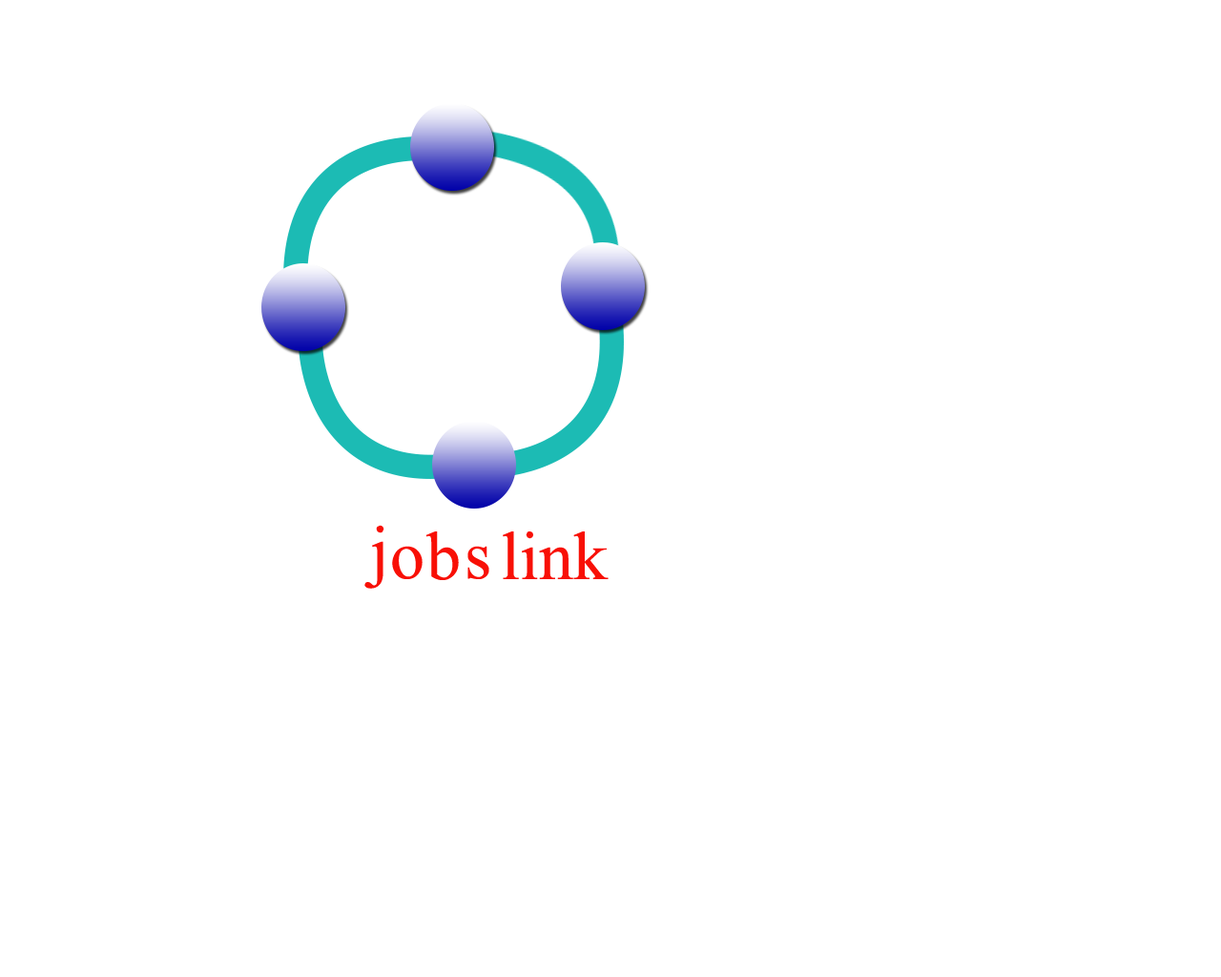
<style>
.page{position:relative;width:1221px;height:977px;background:#ffffff}
.page>*{position:absolute;margin:0}
.t1{font:68.7px "TimesNewRomanPSMT";color:#f81006}
</style>
<div class="page">
<p class="t1" style="left:364px;top:525px;width:20px;height:64px">j</p>
<p class="t1" style="left:425px;top:531px;width:34px;height:49px">b</p>
<p class="t1" style="left:503px;top:531px;width:106px;height:48px">link</p>
<p class="t1" style="left:392px;top:546px;width:31px;height:33px">o</p>
<p class="t1" style="left:467px;top:546px;width:22px;height:33px">s</p>
</div>
